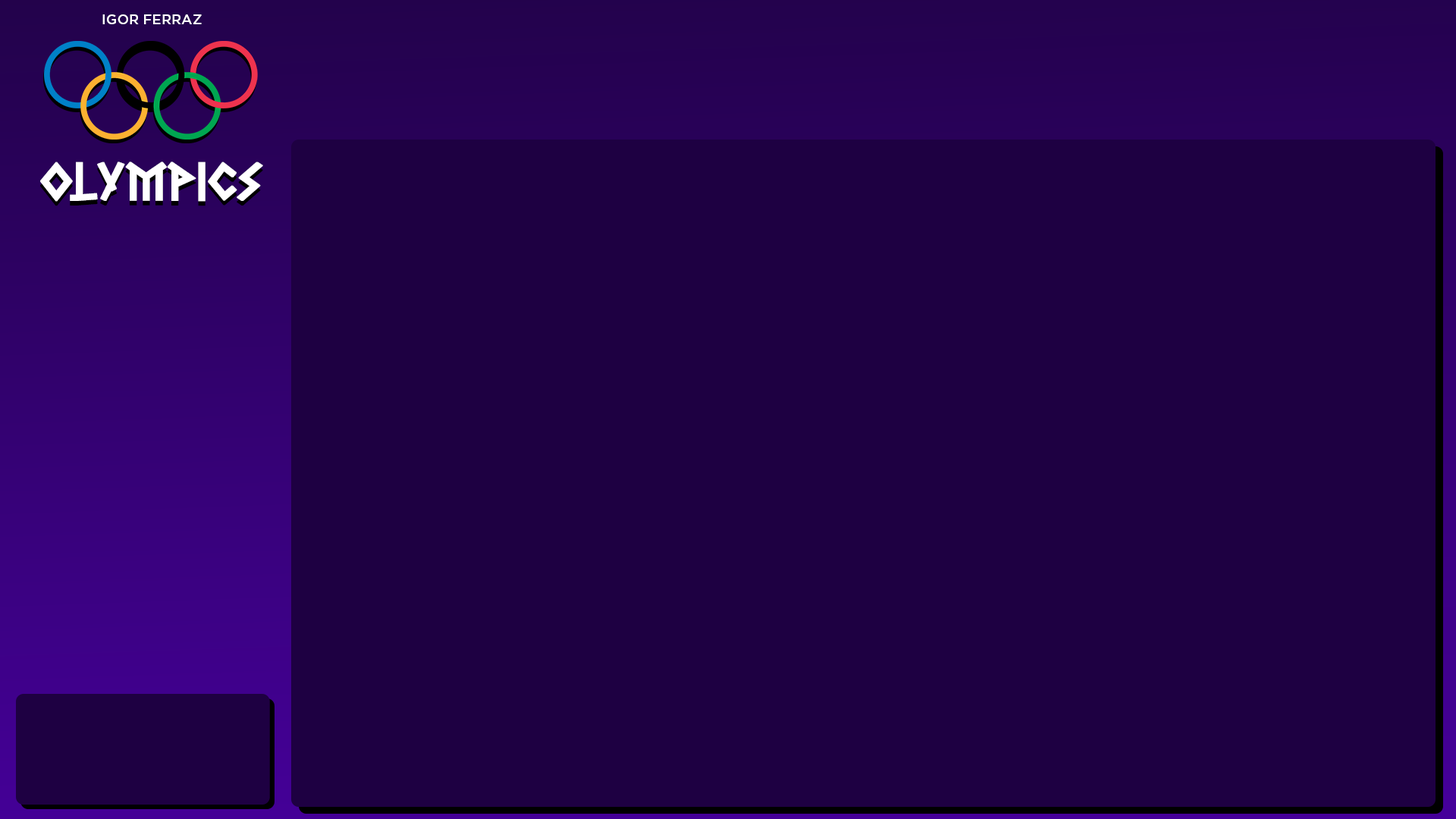
<style>
.page{position:relative;width:1456px;height:819px;background:#1e0042}
.page>*{position:absolute;margin:0}
.t1{font:13.9px "Gotham-Medium";color:#ffffff}
.t2{font:54.5px "GreekFreakRegular";color:#ffffff;font-weight:bold}
.t3{font:54.5px "GreekFreakRegular";font-weight:bold}
</style>
<div class="page">
<p class="t1" style="left:102px;top:14px;width:100px;height:10px">IGOR FERRAZ</p>
<p class="t2" style="left:40px;top:162px;width:223px;height:40px">OLYMPICS</p>
<p class="t3" style="left:40px;top:166px;width:223px;height:40px">OLYMPICS</p>
</div>
